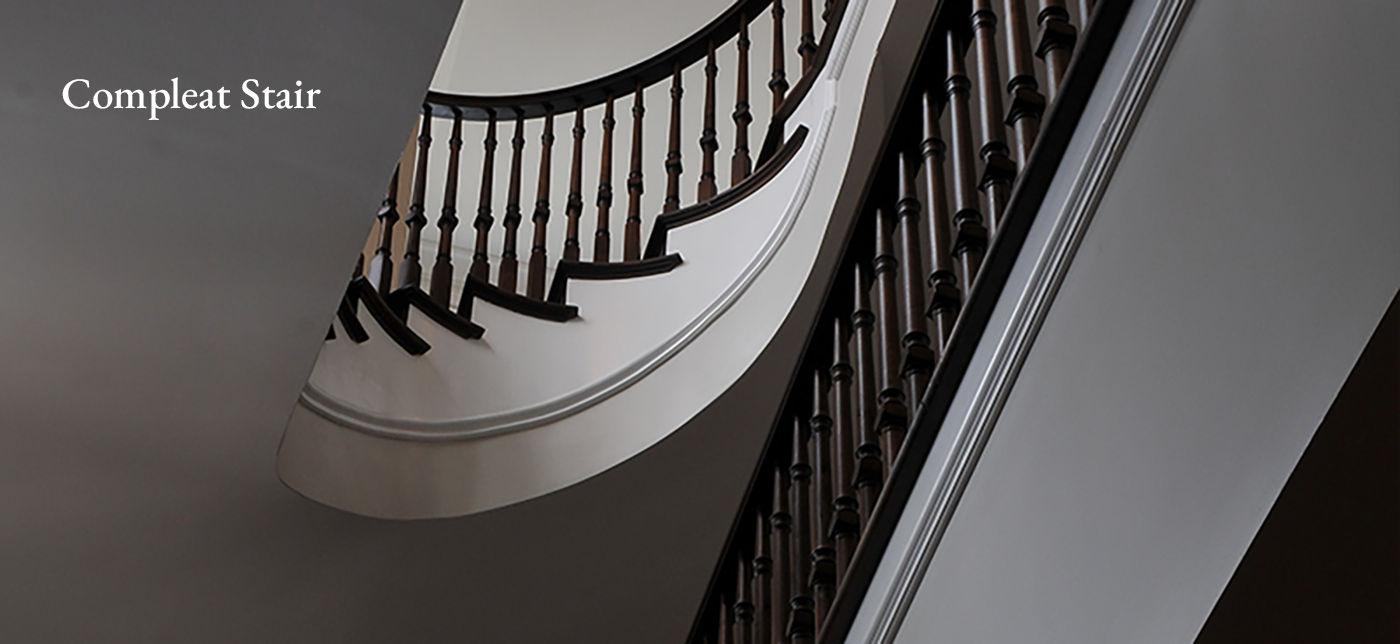
<style>
.page{position:relative;width:1400px;height:644px}
.page>*{position:absolute;margin:0}
.t1{font:43.5px "EBGaramond-Medium";color:#ffffff}
</style>
<div class="page">
<p class="t1" style="left:62px;top:77px;width:259px;height:43px">Compleat Stair</p>
</div>
